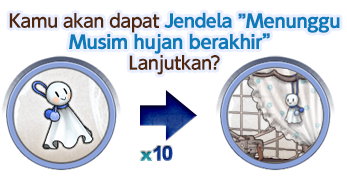
<style>
.page{position:relative;width:347px;height:177px;background:#ffffff}
.page>*{position:absolute;margin:0}
.t1{font:18px/21px "UDShinGoPro-DeBold";letter-spacing:-0.04em;color:#0d7bba;font-weight:bold}
.t2{font:18px/21px "UDShinGoPro-DeBold";letter-spacing:-0.04em;color:#50260d}
.t3{font:18px/21px "UDShinGoPro-Bold";letter-spacing:-0.04em;color:#0d7bba}
</style>
<div class="page">
<p class="t1" style="left:9px;top:12px;width:331px;height:63px;text-align:center"><span class="t2">Kamu akan dapat </span><span class="t3">Jendela </span>”Menunggu<br>Musim hujan berakhir”<br><span class="t2">Lanjutkan?</span></p>
</div>
